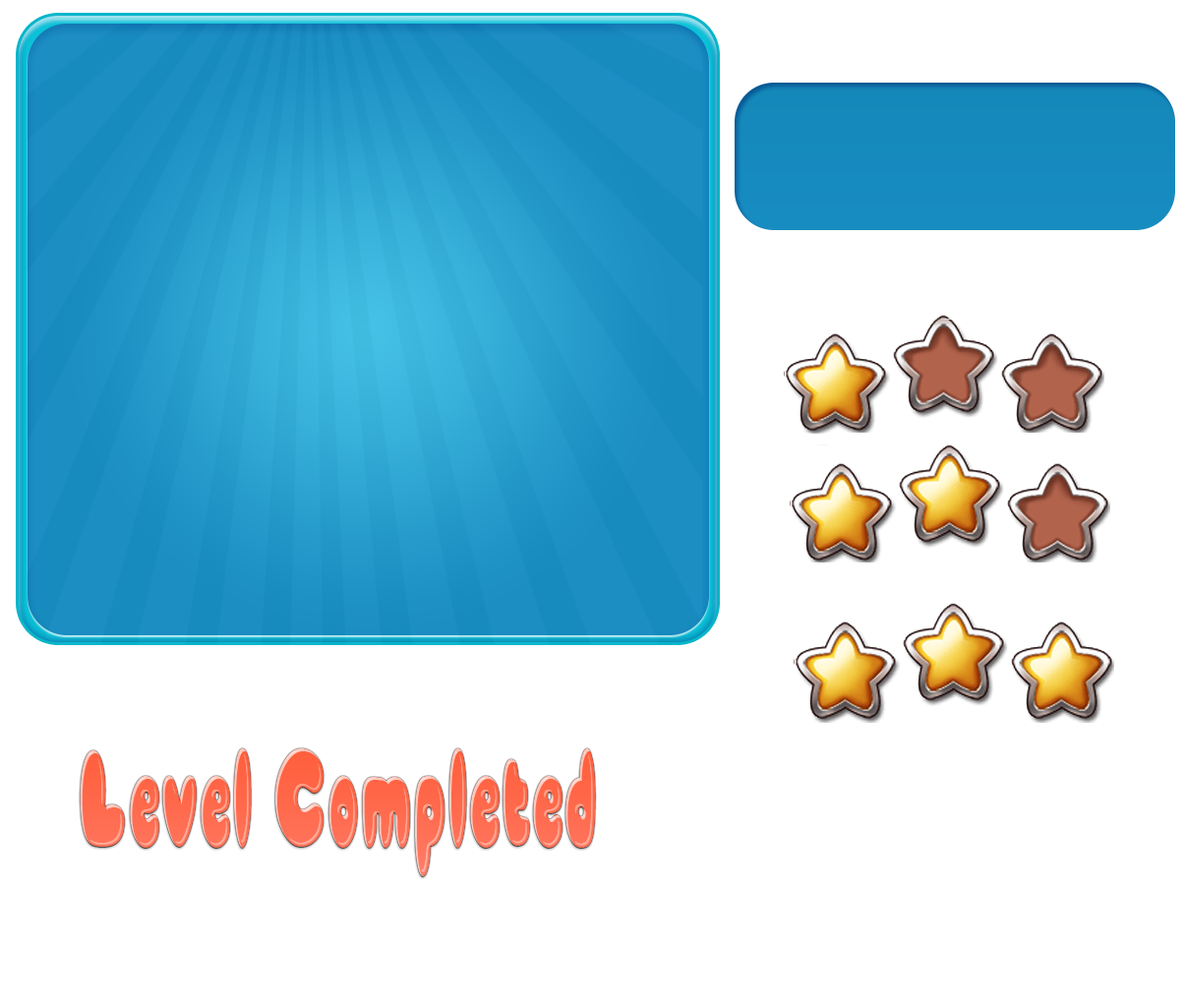
<style>
.page{position:relative;width:1184px;height:1007px;background:#ffffff}
.page>*{position:absolute;margin:0}
.t1{font:132.8px "Babycakes";letter-spacing:0.02em;color:#ff6d52;scale:0.46 1}
</style>
<div class="page">
<p class="t1" style="left:80px;top:748px;width:516px;height:128px">Level Completed</p>
<p class="t1" style="left:80px;top:748px;width:516px;height:128px">Level Completed</p>
</div>
